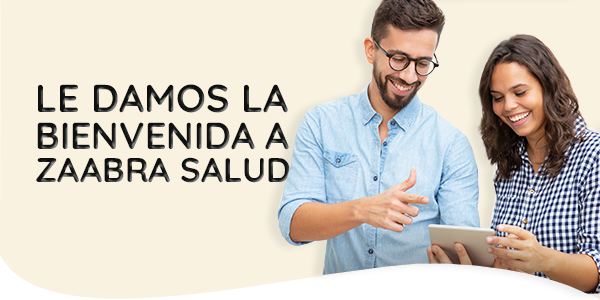
<style>
.page{position:relative;width:600px;height:300px;background:#f9f2e1}
.page>*{position:absolute;margin:0}
.t1{font:38.8px "Quicksand-Bold";color:#1c1d1d}
.t2{font:37.5px "Quicksand-Bold";color:#1c1d1d}
.t3{font:34.1px "Quicksand-Bold";color:#1c1d1d}
</style>
<div class="page">
<p class="t1" style="left:38px;top:84px;width:250px;height:29px">LE DAMOS LA</p>
<p class="t2" style="left:37px;top:122px;width:252px;height:28px">BIENVENIDA A</p>
<p class="t3" style="left:36px;top:157px;width:254px;height:26px">ZAABRA SALUD</p>
</div>
